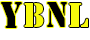
<style>
.page{position:relative;width:90px;height:40px;background:#ffffff}
.page>*{position:absolute;margin:0}
.t1{font:33.8px "StencilStd";color:#000000;scale:0.93 1}
.t2{font:31.8px "StencilStd";color:#f7fa0c;scale:0.9 1}
.t3{font:32.8px "StencilStd";color:#000000;scale:0.89 1}
.t4{font:30.8px "StencilStd";color:#f7fa0c;scale:1.07 1}
</style>
<div class="page">
<p class="t1" style="left:1px;top:2px;width:21px;height:26px">y</p>
<p class="t2" style="left:24px;top:3px;width:20px;height:24px">b</p>
<p class="t3" style="left:47px;top:2px;width:20px;height:25px">n</p>
<p class="t4" style="left:69px;top:3px;width:19px;height:24px">l</p>
</div>
